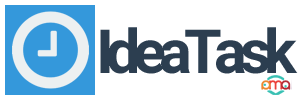
<style>
.page{position:relative;width:300px;height:100px;background:#ffffff}
.page>*{position:absolute;margin:0}
.t1{font:61px "Roboto-Bold";letter-spacing:-0.12em;color:#2c3e50}
</style>
<div class="page">
<p class="t1" style="left:100px;top:27px;width:198px;height:47px">IdeaTask</p>
</div>
